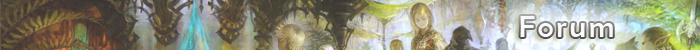
<style>
.page{position:relative;width:700px;height:50px}
.page>*{position:absolute;margin:0}
.t1{font:30px "BerlinSansFB-Reg";letter-spacing:0.1em;color:#ffffff}
</style>
<div class="page">
<p class="t1" style="left:520px;top:16px;width:93px;height:21px">Forum</p>
</div>
